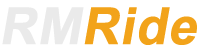
<style>
.page{position:relative;width:200px;height:52px;background:#ffffff}
.page>*{position:absolute;margin:0}
.t1{font:51px "Arial-BoldMT";color:#f2a31a;font-weight:bold;font-style:italic}
.t2{font:51px "Arial-BoldMT";color:#eaeaea;font-weight:bold;font-style:italic}
</style>
<div class="page">
<p class="t1" style="left:2px;top:7px;width:195px;height:38px"><span class="t2">RM</span>Ride</p>
</div>
